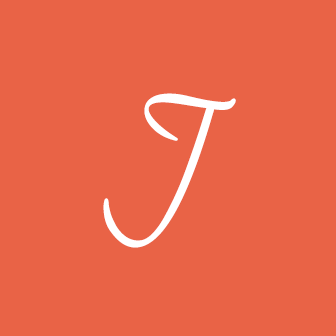
<style>
.page{position:relative;width:336px;height:336px;background:#e96346}
.page>*{position:absolute;margin:0}
.t1{font:166.7px "BilboSwashCaps-Regular";color:#ffffff;font-weight:bold}
</style>
<div class="page">
<p class="t1" style="left:103px;top:93px;width:133px;height:155px">J</p>
</div>
